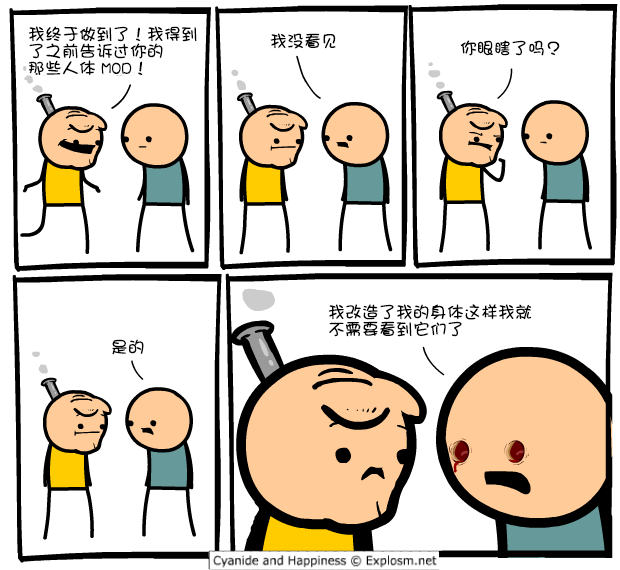
<style>
.page{position:relative;width:620px;height:570px;background:#ffffff}
.page>*{position:absolute;margin:0}
.t1{font:17px/17px "DFGirl";color:#000000}
.t2{font:17px "DFGirl";color:#000000}
</style>
<div class="page">
<p class="t1" style="left:28px;top:26px;width:169px;height:50px">我终于做到了！我得到<br>了之前告诉过你的<br>那些人体 MOD！</p>
<p class="t2" style="left:270px;top:33px;width:66px;height:16px">我没看见</p>
<p class="t2" style="left:460px;top:40px;width:100px;height:16px">你眼瞎了吗？</p>
<p class="t1" style="left:328px;top:304px;width:204px;height:33px">我改造了我的身体这样我就<br>不需要看到它们了</p>
<p class="t2" style="left:112px;top:339px;width:32px;height:16px">是的</p>
</div>
